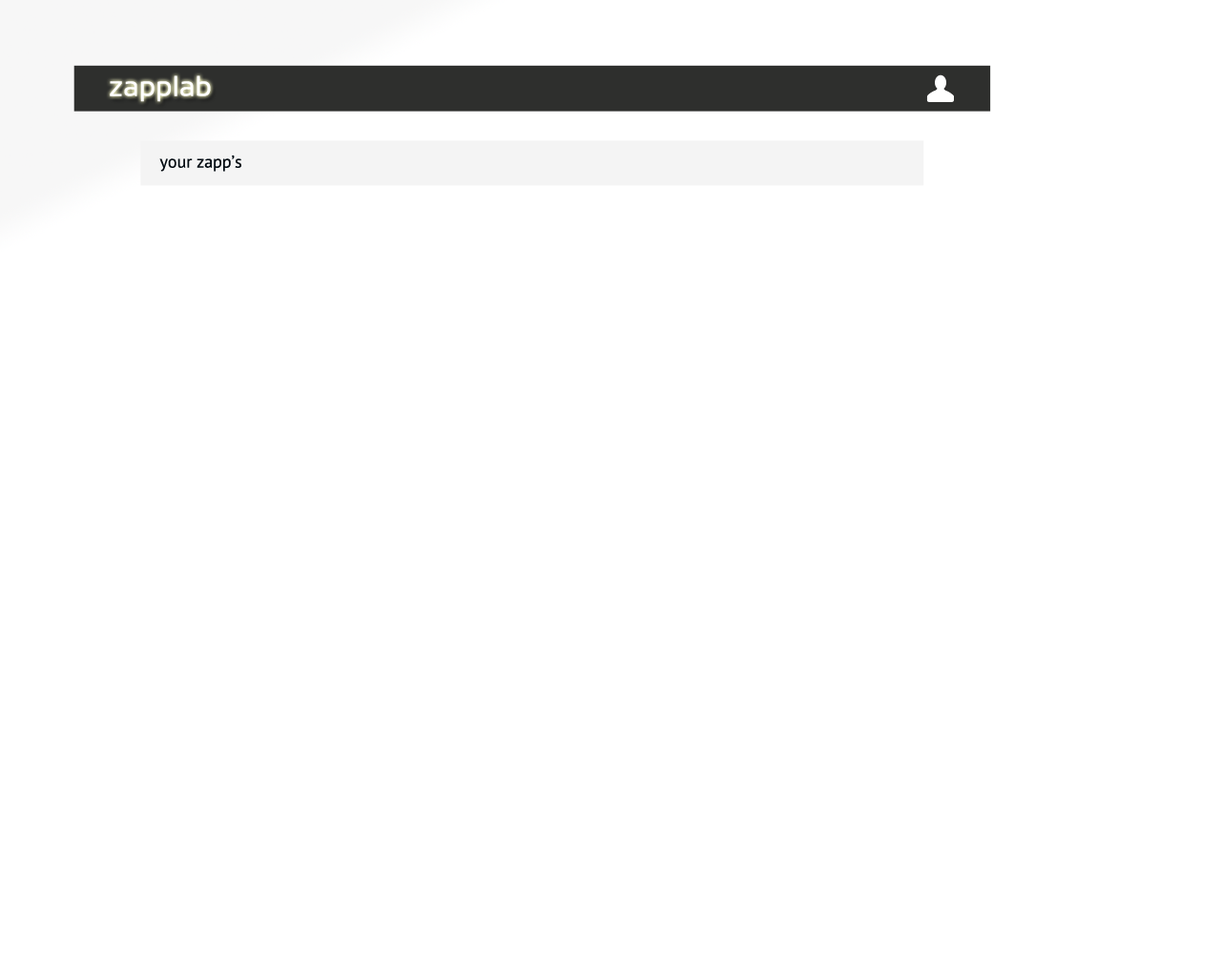
<style>
.page{position:relative;width:1221px;height:977px;background:#ffffff}
.page>*{position:absolute;margin:0}
.t1{font:28.6px "Sansation-Regular";color:#ffffff}
.t2{font:17.2px "PTSans-Regular";color:#020b12}
</style>
<div class="page">
<p class="t1" style="left:110px;top:75px;width:101px;height:27px">zapplab</p>
<p class="t2" style="left:159px;top:155px;width:82px;height:17px">your zapp’s</p>
</div>
